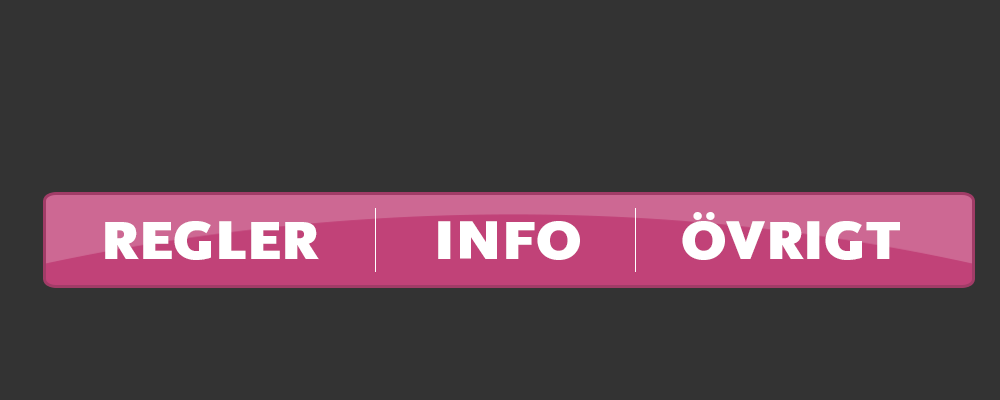
<style>
.page{position:relative;width:1000px;height:400px;background:#333333}
.page>*{position:absolute;margin:0}
.t1{font:56.8px "ScalaSansBlack";color:#ffffff}
</style>
<div class="page">
<p class="t1" style="left:105px;top:212px;width:795px;height:48px">REGLER        INFO       ÖVRIGT</p>
</div>
